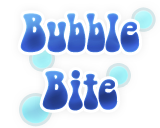
<style>
.page{position:relative;width:160px;height:128px;background:#ffffff}
.page>*{position:absolute;margin:0}
.t1{font:48px "BellBottom.Laser";letter-spacing:-0.02em}
</style>
<div class="page">
<p class="t1" style="left:20px;top:13px;width:120px;height:98px;text-align:center">Bubble<br>Bite</p>
</div>
